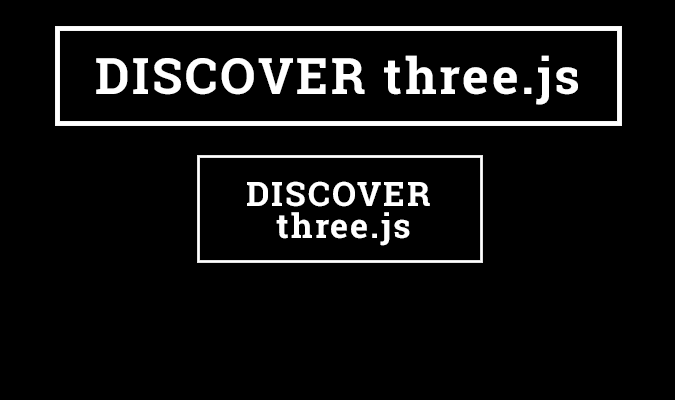
<style>
.page{position:relative;width:675px;height:400px;background:#000000}
.page>*{position:absolute;margin:0}
.t1{font:50px "RobotoSlab-Bold";letter-spacing:0.055em;color:#ffffff}
.t2{font:34px/32px "RobotoSlab-Bold";letter-spacing:0.055em;color:#ffffff}
</style>
<div class="page">
<p class="t1" style="left:96px;top:55px;width:482px;height:50px">DISCOVER three.js</p>
<p class="t2" style="left:247px;top:181px;width:183px;height:65px;text-align:center">DISCOVER <br>three.js</p>
</div>
